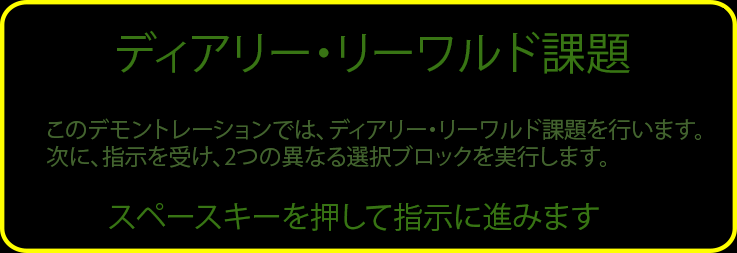
<style>
.page{position:relative;width:737px;height:253px;background:#000000}
.page>*{position:absolute;margin:0}
.t1{font:45px "KozGoPr6N-Regular";color:#387414}
.t2{font:22.5px "KozGoPr6N-Regular";color:#43632f}
.t3{font:30px "KozGoPr6N-Regular";color:#387414}
</style>
<div class="page">
<p class="t1" style="left:117px;top:30px;width:513px;height:44px">ディアリー・リーワルド課題</p>
<p class="t2" style="left:47px;top:118px;width:654px;height:50px">このデモントレーションでは、ディアリー・リーワルド課題を行います。<br>次に、指示を受け、2つの異なる選択ブロックを実行します。</p>
<p class="t3" style="left:109px;top:202px;width:490px;height:29px">スペースキーを押して指示に進みます</p>
</div>
